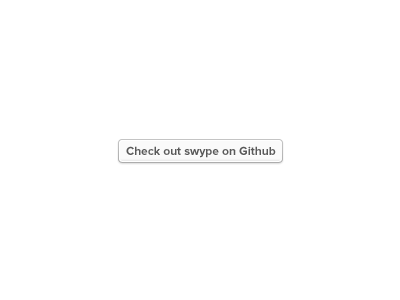
<style>
.page{position:relative;width:400px;height:300px;background:#ffffff}
.page>*{position:absolute;margin:0}
.t1{font:12px "ProximaNova-Bold";color:#595959}
</style>
<div class="page">
<p class="t1" style="left:126px;top:146px;width:150px;height:12px">Check out swype on Github</p>
</div>
